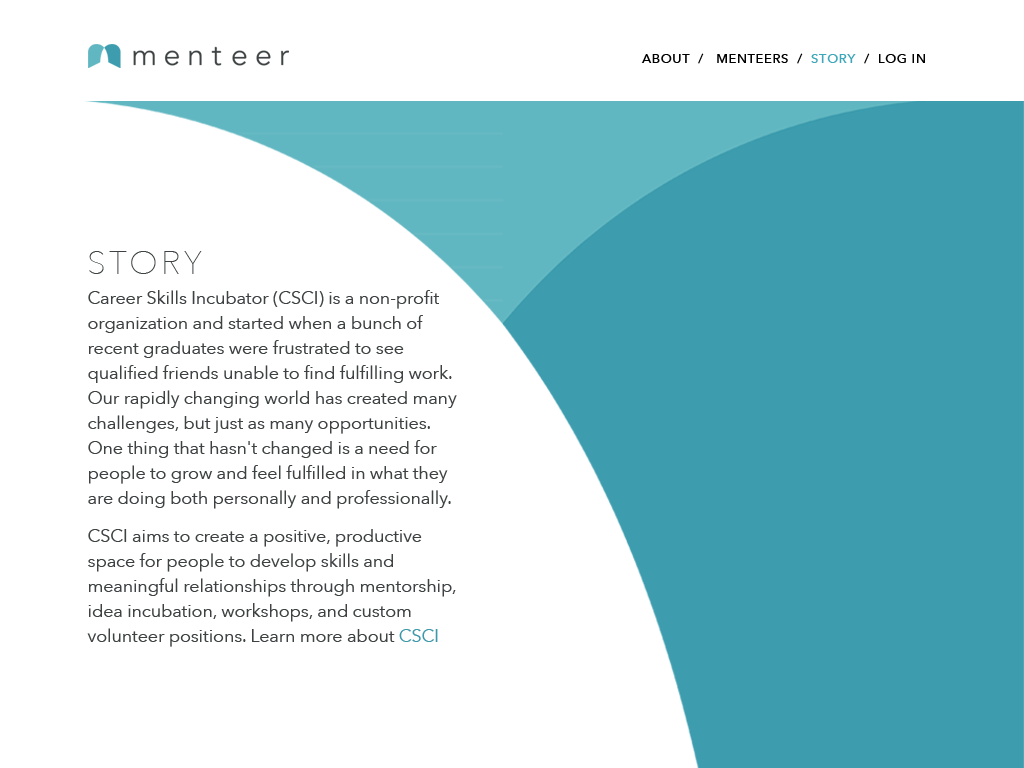
<style>
.page{position:relative;width:1024px;height:768px;background:#ffffff}
.page>*{position:absolute;margin:0}
.t1{font:12.5px "AvenirNext-Medium";letter-spacing:0.075em;color:#000000}
.t2{font:12.5px "AvenirNext-Medium";letter-spacing:0.075em;color:#3ea8ba}
.t3{font:33.3px "AvenirNext-UltraLight";letter-spacing:0.1em;color:#3e4243}
.t4{font:17.7px/25px "AvenirNext-Regular";color:#3e4243}
.t5{font:17.7px/25px "AvenirNext-Regular";color:#3e98aa}
</style>
<div class="page">
<p class="t1" style="left:641px;top:53px;width:284px;height:11px">ABOUT  /   MENTEERS  /  <span class="t2">STORY</span>  /  LOG IN</p>
<p class="t3" style="left:89px;top:251px;width:113px;height:23px">STORY</p>
<p class="t4" style="left:87px;top:290px;width:370px;height:357px">Career Skills Incubator (CSCI) is a non-profit organization and started when a bunch of recent graduates were frustrated to see qualified friends unable to find fulfilling work. Our rapidly changing world has created many challenges, but just as many opportunities. One thing that hasn't changed is a need for people to grow and feel fulfilled in what they are doing both personally and professionally.<br><br>CSCI aims to create a positive, productive space for people to develop skills and meaningful relationships through mentorship, idea incubation, workshops, and custom volunteer positions. Learn more about <span class="t5">CSCI</span></p>
</div>
